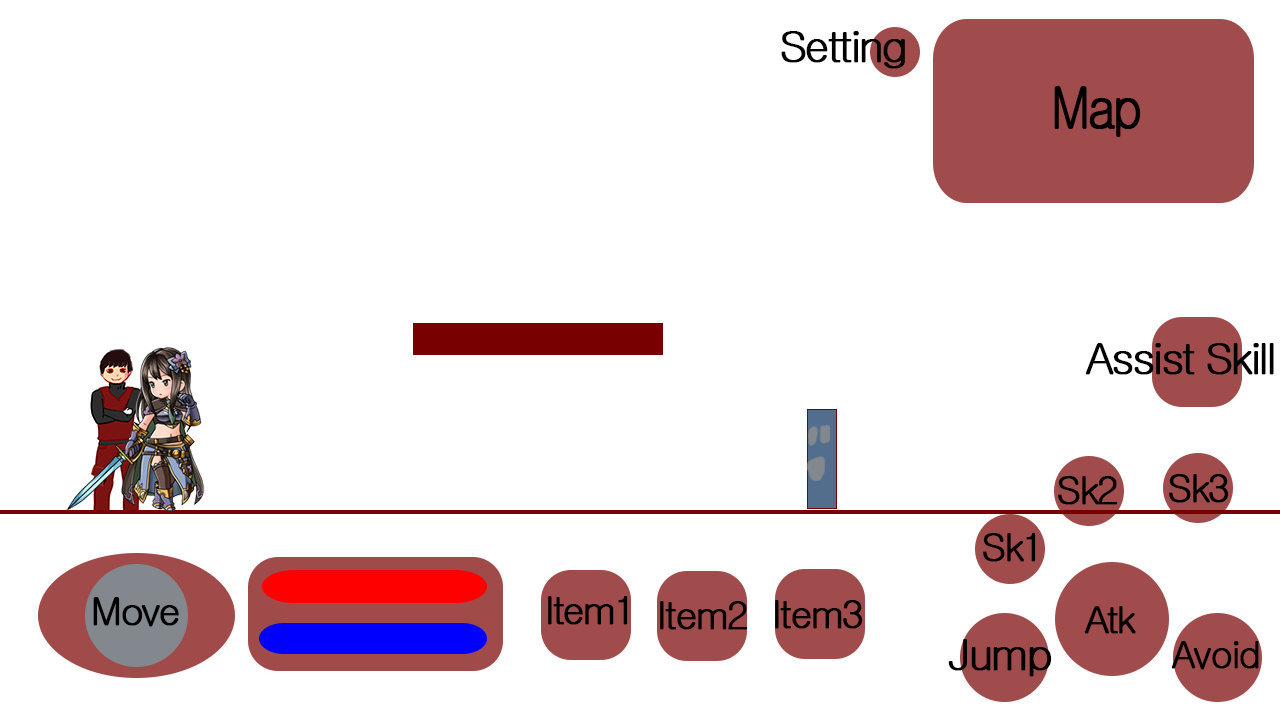
<style>
.page{position:relative;width:1280px;height:720px;background:#ffffff}
.page>*{position:absolute;margin:0}
.t1{font:43.7px "Gulim";letter-spacing:-0.08em;color:#000000;font-weight:bold}
.t2{font:57.9px "Gulim";letter-spacing:-0.08em;color:#000000;font-weight:bold;scale:0.85 1}
.t3{font:38.9px "Gulim";letter-spacing:-0.08em;color:#000000;font-weight:bold}
.t4{font:38.2px "Gulim";letter-spacing:-0.08em;color:#000000;font-weight:bold}
.t5{font:37.4px "Gulim";letter-spacing:-0.08em;color:#000000;font-weight:bold}
</style>
<div class="page">
<p class="t1" style="left:781px;top:31px;width:124px;height:38px">Setting</p>
<p class="t2" style="left:1054px;top:86px;width:87px;height:51px">Map</p>
<p class="t1" style="left:1086px;top:343px;width:188px;height:32px">Assist Skill</p>
<p class="t3" style="left:1058px;top:476px;width:60px;height:29px">Sk2</p>
<p class="t3" style="left:1169px;top:474px;width:60px;height:29px">Sk3</p>
<p class="t3" style="left:983px;top:533px;width:53px;height:29px">Sk1</p>
<p class="t3" style="left:93px;top:597px;width:86px;height:30px">Move</p>
<p class="t3" style="left:548px;top:596px;width:80px;height:29px">Item1</p>
<p class="t3" style="left:660px;top:601px;width:88px;height:29px">Item2</p>
<p class="t3" style="left:775px;top:600px;width:88px;height:29px">Item3</p>
<p class="t4" style="left:1084px;top:606px;width:52px;height:28px">Atk</p>
<p class="t1" style="left:948px;top:639px;width:104px;height:38px">Jump</p>
<p class="t5" style="left:1171px;top:641px;width:88px;height:29px">Avoid</p>
</div>
